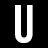
<style>
.page{position:relative;width:48px;height:48px;background:#000000}
.page>*{position:absolute;margin:0}
.t1{font:54px "BebasNeue";color:#ffffff}
</style>
<div class="page">
<p class="t1" style="left:15px;top:5px;width:18px;height:38px">U</p>
</div>
